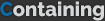
<style>
.page{position:relative;width:105px;height:21px;background:#333333}
.page>*{position:absolute;margin:0}
.t1{font:20px "Raleway-ExtraBold";color:#d5d7d8}
.t2{font:20px "Raleway-ExtraBold";color:#116aa2}
</style>
<div class="page">
<p class="t1" style="left:0px;top:1px;width:104px;height:20px"><span class="t2">C</span>ontaining</p>
</div>
